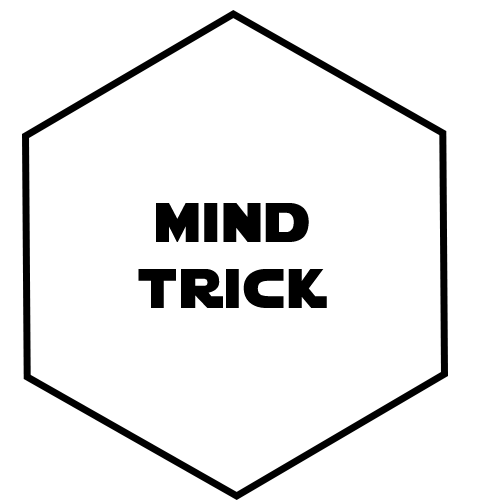
<style>
.page{position:relative;width:500px;height:500px;background:#ffffff}
.page>*{position:absolute;margin:0}
.t1{font:55px "StarJedi";letter-spacing:0.07em;color:#000000}
</style>
<div class="page">
<p class="t1" style="left:138px;top:203px;width:189px;height:105px;text-align:center">mind<br>trick</p>
</div>
